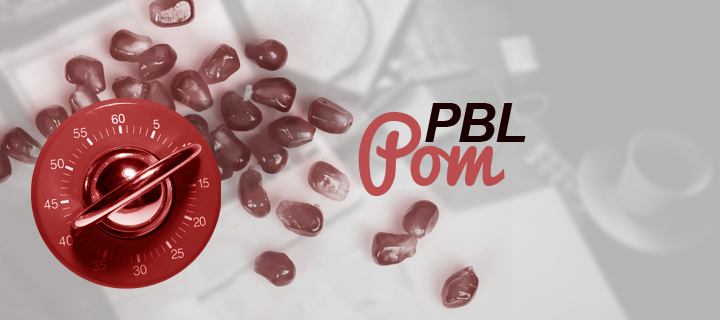
<style>
.page{position:relative;width:720px;height:320px}
.page>*{position:absolute;margin:0}
.t1{font:83.5px "Pacifico";color:#bb4e4e}
.t2{font:53.6px "Arial-BoldItalicMT";letter-spacing:-0.04em;color:#1a0000}
</style>
<div class="page">
<p class="t1" style="left:358px;top:112px;width:147px;height:84px">Pom</p>
<p class="t2" style="left:425px;top:103px;width:101px;height:39px">PBL</p>
</div>
